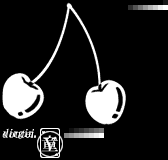
<style>
.page{position:relative;width:168px;height:160px;background:#000000}
.page>*{position:absolute;margin:0}
.t1{font:11px "HGMinchoB";color:#ffffff;font-style:italic}
.t2{font:16px "HGMinchoB";color:#ffffff}
</style>
<div class="page">
<p class="t1" style="left:3px;top:129px;width:33px;height:10px">virgin.</p>
<p class="t2" style="left:43px;top:137px;width:14px;height:13px">Ｖ</p>
</div>
